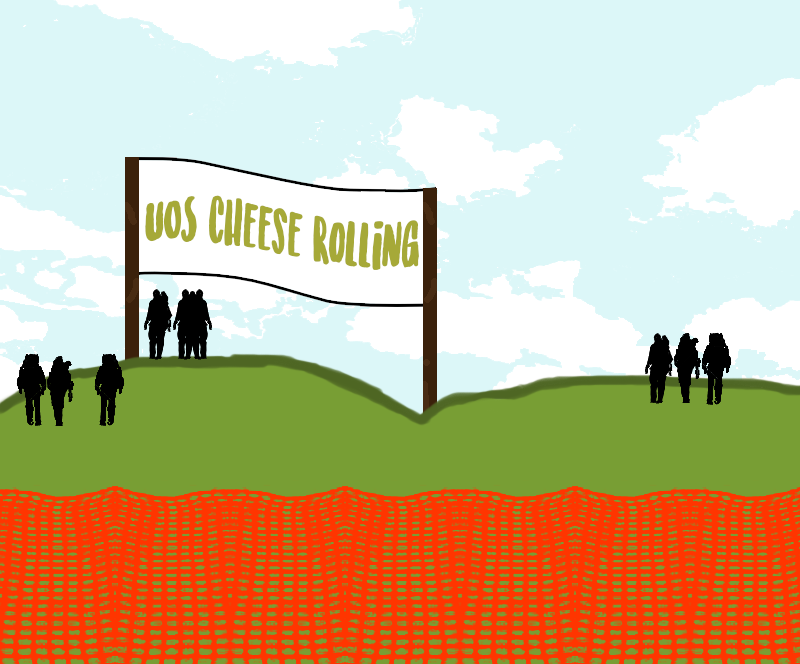
<style>
.page{position:relative;width:800px;height:664px;background:#dcf7f8}
.page>*{position:absolute;margin:0}
.t1{font:60px "SunriseInternationalDemo";color:#a6a938;scale:0.78 1}
</style>
<div class="page">
<p class="t1" style="left:145px;top:195px;width:274px;height:75px;rotate:3deg">UOS Cheese Rolling</p>
</div>
